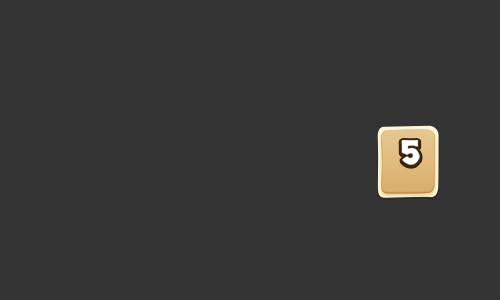
<style>
.page{position:relative;width:500px;height:300px;background:#333333}
.page>*{position:absolute;margin:0}
.t1{font:33px "Skranji-Bold";letter-spacing:0.02em;color:#ffffff;scale:0.96 1}
</style>
<div class="page">
<p class="t1" style="left:401px;top:140px;width:19px;height:25px">5</p>
</div>
